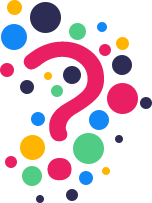
<style>
.page{position:relative;width:152px;height:203px;background:#ffffff}
.page>*{position:absolute;margin:0}
.t1{font:200px "Linotte-Regular";letter-spacing:0.03em;color:#e91e63}
</style>
<div class="page">
<p class="t1" style="left:23px;top:41px;width:81px;height:140px">?</p>
</div>
